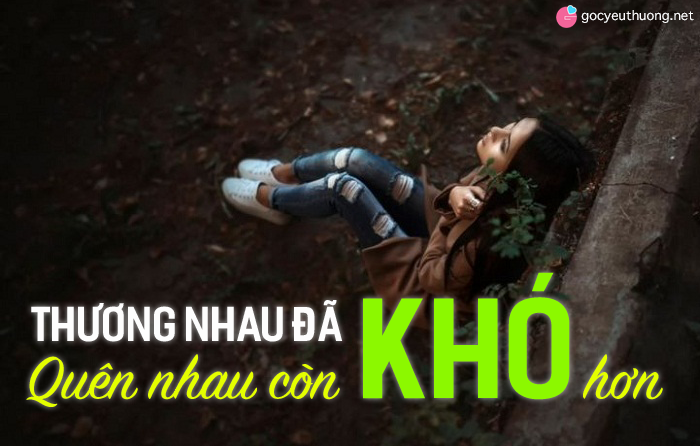
<style>
.page{position:relative;width:700px;height:446px}
.page>*{position:absolute;margin:0}
.t1{font:18px "AppleSymbols";color:#fdfdfd}
.t2{font:132.8px "iCielFesterSemiCondensed-Bold";color:#8cf800;text-transform:uppercase}
.t3{font:45.6px "iCielFesterSemiCondensed-Bold";color:#fdfdfd}
.t4{font:66.3px "SignPainter-HouseScript";color:#e4ff00}
</style>
<div class="page">
<p class="t1" style="left:581px;top:10px;width:113px;height:13px">gocyeuthuong.net</p>
<p class="t2" style="left:363px;top:272px;width:207px;height:128px">Khó</p>
<p class="t3" style="left:31px;top:300px;width:312px;height:42px">Thương nhau đã</p>
<p class="t4" style="left:26px;top:354px;width:637px;height:53px">Quên nhau còn                 hơn</p>
</div>
